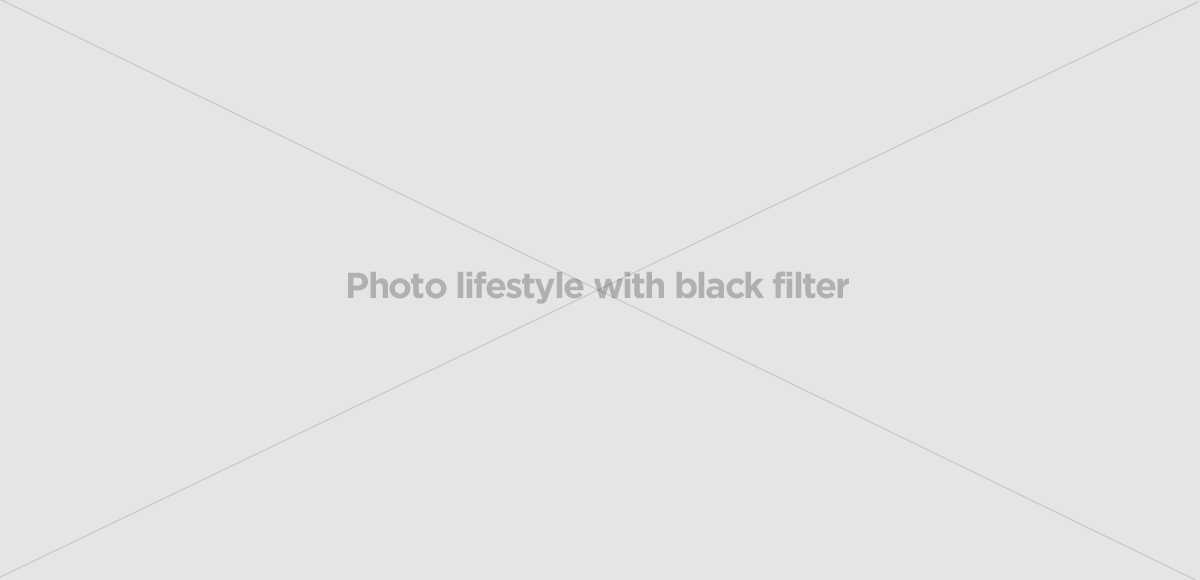
<style>
.page{position:relative;width:1200px;height:580px;background:#e5e5e5}
.page>*{position:absolute;margin:0}
.t1{font:36px "GothamBold";letter-spacing:-0.05em;color:#b1b0b0}
</style>
<div class="page">
<p class="t1" style="left:348px;top:271px;width:501px;height:33px">Photo lifestyle with black filter</p>
</div>
